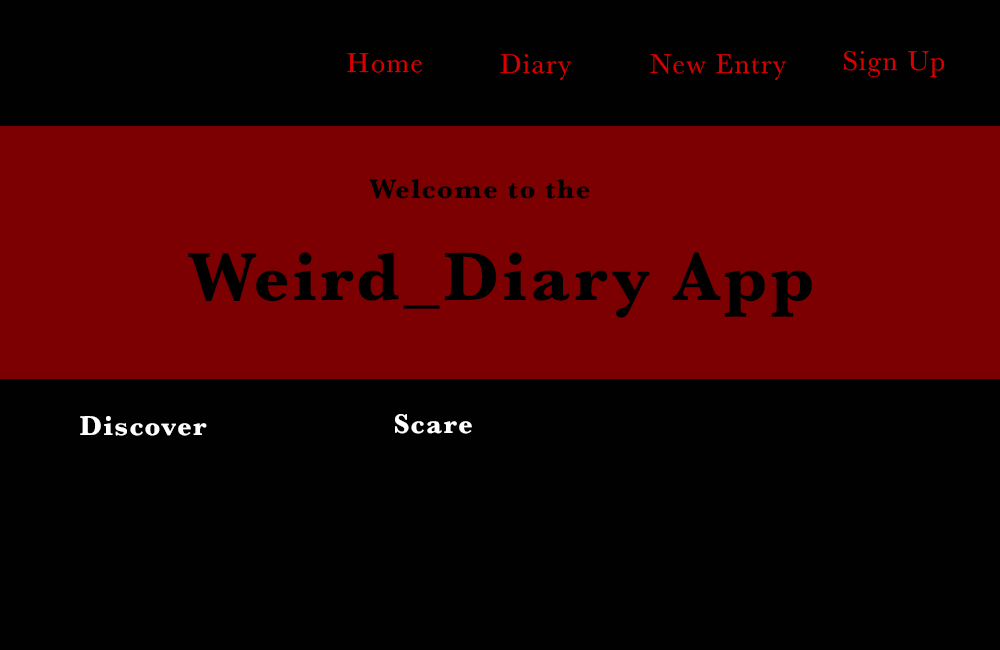
<style>
.page{position:relative;width:1000px;height:650px;background:#010101}
.page>*{position:absolute;margin:0}
.t1{font:28.3px "Baskerville";letter-spacing:0.05em;color:#d90000}
.t2{font:28.3px "Baskerville-Bold";letter-spacing:0.05em;color:#010101}
.t3{font:70.9px "Baskerville-Bold";letter-spacing:0.05em;color:#000000}
.t4{font:28.3px "Baskerville-Bold";letter-spacing:0.05em;color:#ffffff}
</style>
<div class="page">
<p class="t1" style="left:347px;top:53px;width:75px;height:20px">Home</p>
<p class="t1" style="left:500px;top:53px;width:71px;height:27px">Diary</p>
<p class="t1" style="left:650px;top:54px;width:136px;height:26px">New Entry</p>
<p class="t1" style="left:844px;top:50px;width:101px;height:28px">Sign Up</p>
<p class="t2" style="left:369px;top:179px;width:221px;height:20px">Welcome to the</p>
<p class="t3" style="left:188px;top:252px;width:624px;height:66px">Weird_Diary App</p>
<p class="t4" style="left:395px;top:414px;width:77px;height:20px">Scare</p>
<p class="t4" style="left:80px;top:416px;width:127px;height:20px">Discover</p>
</div>
